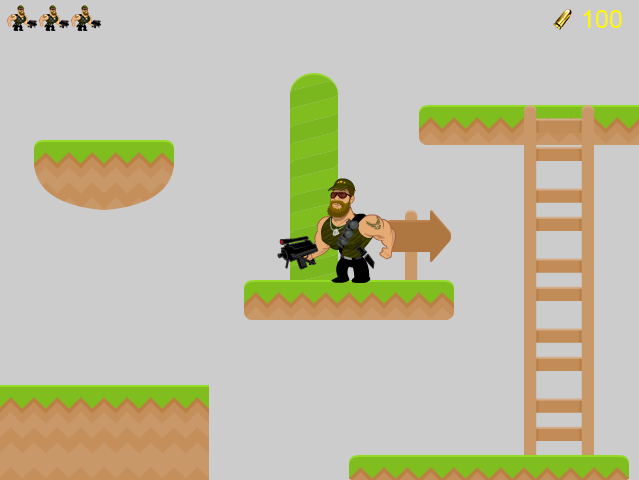
<style>
.page{position:relative;width:639px;height:480px;background:#cccccc}
.page>*{position:absolute;margin:0}
.t1{font:25px "ArialMT";color:#fff600}
</style>
<div class="page">
<p class="t1" style="left:583px;top:10px;width:39px;height:18px">100</p>
</div>
